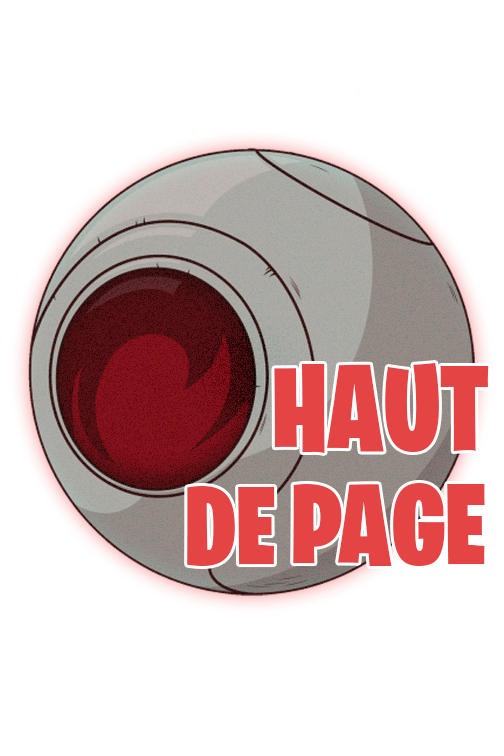
<style>
.page{position:relative;width:504px;height:756px;background:#ffffff}
.page>*{position:absolute;margin:0}
.t1{font:121.4px "BurbankBigCondensed-Black";color:#e44444}
.t2{font:109.6px "BurbankBigCondensed-Black";color:#e44444}
.t3{font:114.3px "BurbankBigCondensed-Black";color:#e44444}
</style>
<div class="page">
<p class="t1" style="left:274px;top:363px;width:215px;height:90px">HAUT</p>
<p class="t2" style="left:187px;top:486px;width:88px;height:80px">DE</p>
<p class="t3" style="left:293px;top:483px;width:192px;height:83px">PAGE</p>
</div>
